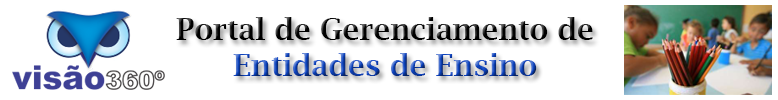
<style>
.page{position:relative;width:778px;height:100px;background:#ffffff}
.page>*{position:absolute;margin:0}
.t1{font:30px "LucidaBright-Demi"}
</style>
<div class="page">
<p class="t1" style="left:176px;top:17px;width:417px;height:59px;text-align:center">Portal de Gerenciamento de<br>Entidades de Ensino</p>
</div>
